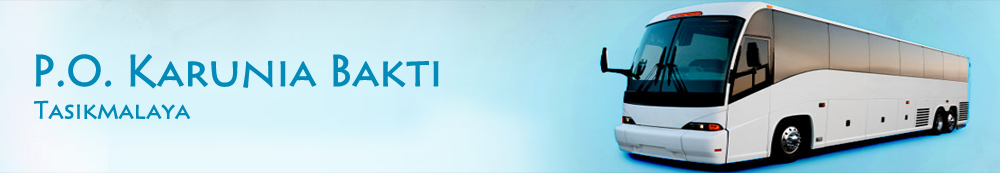
<style>
.page{position:relative;width:1000px;height:173px}
.page>*{position:absolute;margin:0}
.t1{font:41.5px "Pericles";color:#028ab8}
.t2{font:23.3px "Pericles";color:#028ab8}
</style>
<div class="page">
<p class="t1" style="left:36px;top:54px;width:403px;height:35px">P.O. Karunia Bakti</p>
<p class="t2" style="left:34px;top:100px;width:157px;height:20px">Tasikmalaya</p>
</div>
